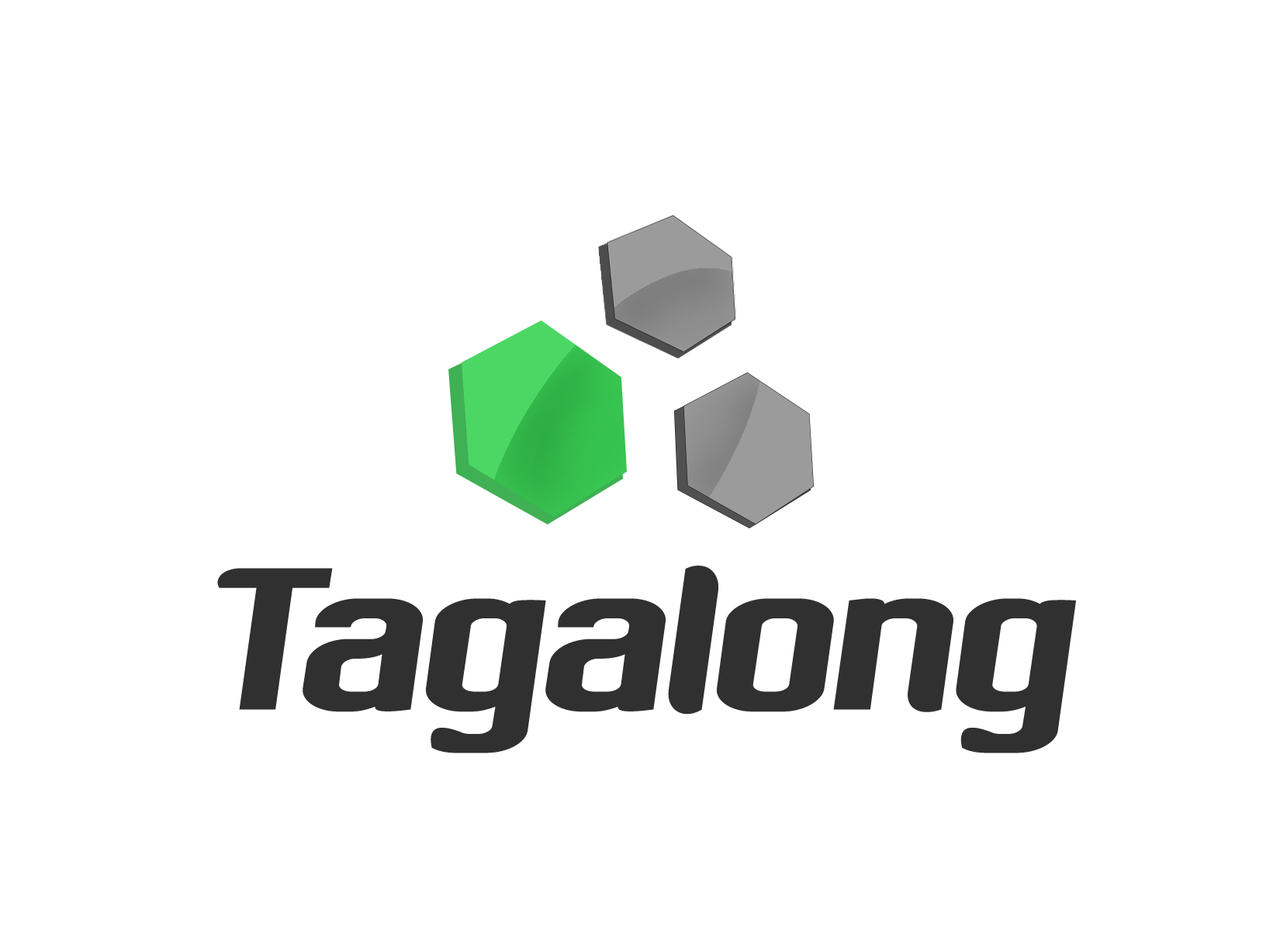
<style>
.page{position:relative;width:1280px;height:931px;background:#ffffff}
.page>*{position:absolute;margin:0}
.t1{font:194px "Sufrimeda";color:#313030}
</style>
<div class="page">
<p class="t1" style="left:217px;top:566px;width:859px;height:188px">Tagalong</p>
</div>
